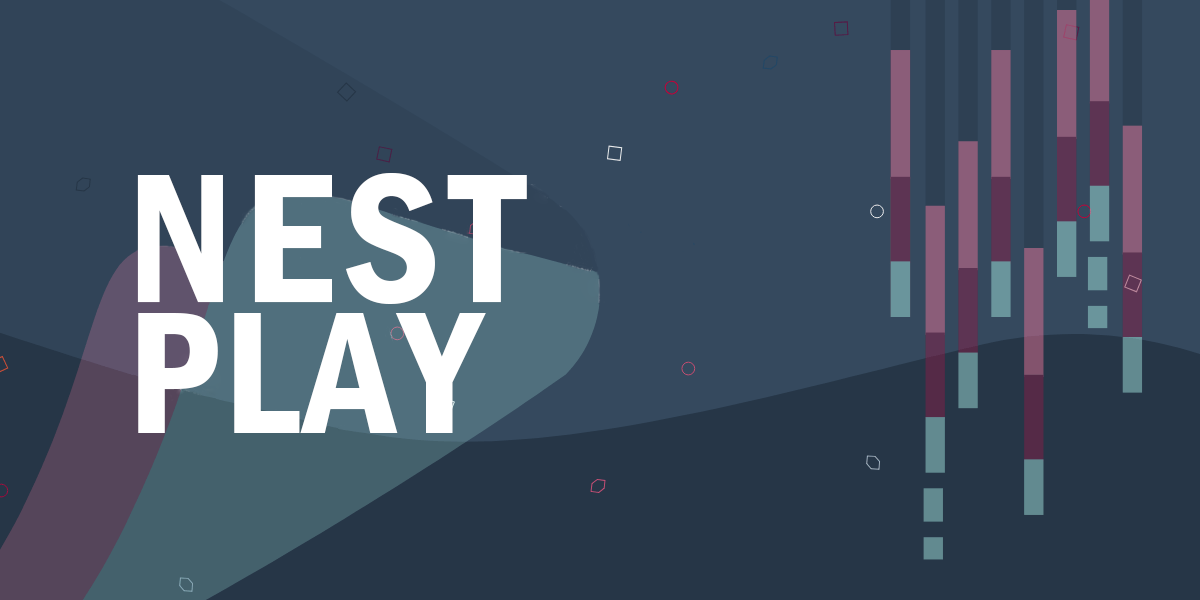
<style>
.page{position:relative;width:1200px;height:600px;background:#35495e}
.page>*{position:absolute;margin:0}
.t1{font:190px "FranklinGothic-DemiCond";letter-spacing:0.05em;color:#ffffff}
.t2{font:180px "FranklinGothic-DemiCond";letter-spacing:0.025em;color:#ffffff}
</style>
<div class="page">
<p class="t1" style="left:137px;top:173px;width:390px;height:131px">NEST</p>
<p class="t2" style="left:138px;top:313px;width:348px;height:120px">PLAY</p>
</div>
